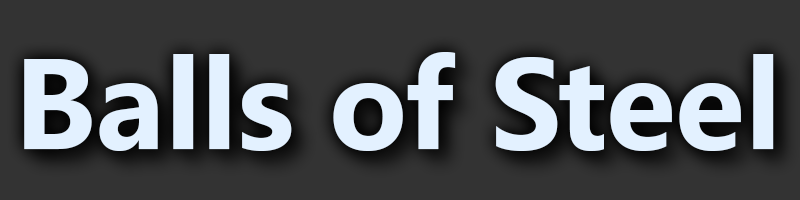
<style>
.page{position:relative;width:800px;height:200px;background:#333333}
.page>*{position:absolute;margin:0}
.t1{font:128px "KhmerUI-Bold";color:#e3f1ff}
</style>
<div class="page">
<p class="t1" style="left:24px;top:52px;width:750px;height:99px">Balls of Steel</p>
</div>
